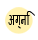
<style>
.page{position:relative;width:38px;height:40px;background:#ffffff}
.page>*{position:absolute;margin:0}
.t1{font:15.7px "Mangal";color:#000000;scale:0.54 1}
</style>
<div class="page">
<p class="t1" style="left:8px;top:11px;width:27px;height:18px">अग्नि</p>
</div>
